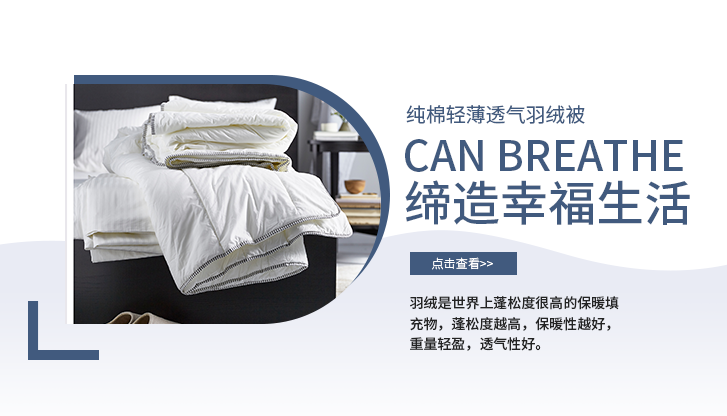
<style>
.page{position:relative;width:727px;height:416px;background:#ffffff}
.page>*{position:absolute;margin:0}
.t1{font:20px "SourceHanSansCN-Regular";color:#415a7e;text-transform:uppercase}
.t2{font:42px "SourceHanSansCN-Medium";color:#415a7e;text-transform:uppercase}
.t3{font:48px "SourceHanSansCN-Medium";color:#415a7e;text-transform:uppercase}
.t4{font:12.2px "SourceHanSansCN-Light";color:#ffffff;text-transform:uppercase}
.t5{font:14px/20.6px "SourceHanSansCN-Medium";color:#232323;text-transform:uppercase}
</style>
<div class="page">
<p class="t1" style="left:406px;top:105px;width:179px;height:19px">纯棉轻薄透气羽绒被</p>
<p class="t2" style="left:405px;top:139px;width:278px;height:33px">Can breathe</p>
<p class="t3" style="left:405px;top:180px;width:285px;height:45px">缔造幸福生活</p>
<p class="t4" style="left:432px;top:257px;width:61px;height:13px">点击查看&gt;&gt;</p>
<p class="t5" style="left:410px;top:296px;width:209px;height:55px">羽绒是世界上蓬松度很高的保暖填<br>充物，蓬松度越高，保暖性越好，<br>重量轻盈，透气性好。</p>
</div>
